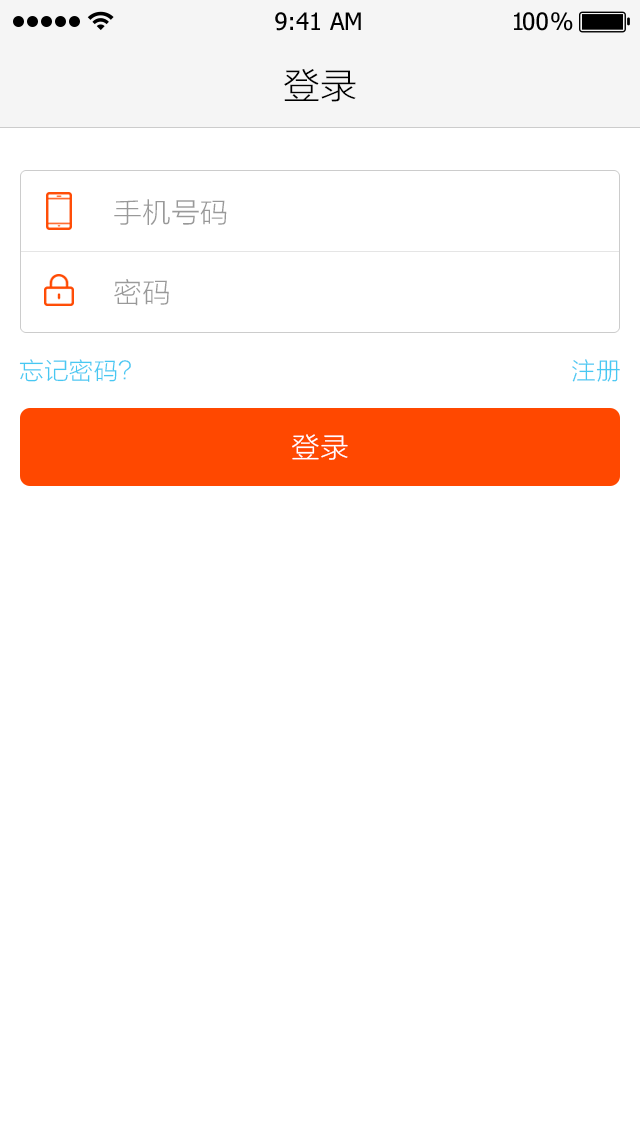
<style>
.page{position:relative;width:640px;height:1136px;background:#ffffff}
.page>*{position:absolute;margin:0}
.t1{font:24px "Tahoma";color:#000000}
.t2{font:24px "Tahoma";letter-spacing:-0.1em;color:#000000}
.t3{font:24px "Tahoma";letter-spacing:-0.25em;color:#000000}
.t4{font:36px "STHeitiSC-Light";color:#000000}
.t5{font:28px "STHeitiSC-Light";color:#999999}
.t6{font:24px "STHeitiSC-Light";color:#47c8f2}
.t7{font:28px "STHeitiSC-Light";color:#ffffff}
</style>
<div class="page">
<p class="t1" style="left:275px;top:12px;width:86px;height:19px">9:41 AM</p>
<p class="t2" style="left:514px;top:12px;width:59px;height:19px">1<span class="t1">0</span><span class="t3">0 </span>%</p>
<p class="t4" style="left:284px;top:69px;width:72px;height:33px">登录</p>
<p class="t5" style="left:114px;top:199px;width:113px;height:26px">手机号码</p>
<p class="t5" style="left:114px;top:279px;width:55px;height:27px">密码</p>
<p class="t6" style="left:19px;top:359px;width:112px;height:23px">忘记密码？</p>
<p class="t6" style="left:572px;top:359px;width:48px;height:23px">注册</p>
<p class="t7" style="left:292px;top:434px;width:56px;height:26px">登录</p>
</div>
